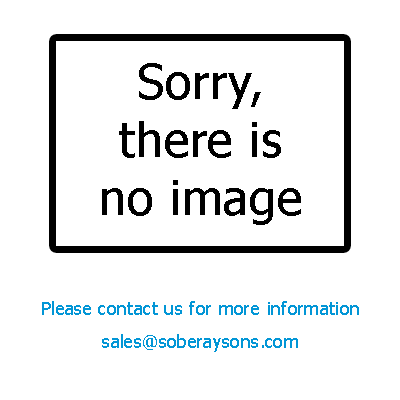
<style>
.page{position:relative;width:400px;height:400px;background:#ffffff}
.page>*{position:absolute;margin:0}
.t1{font:18px "Tahoma";letter-spacing:0.02em;color:#0296d6}
.t2{font:30px "Tahoma";letter-spacing:0.02em;color:#000000}
.t3{font:48px "Tahoma";letter-spacing:0.02em;color:#000000}
</style>
<div class="page">
<p class="t1" style="left:42px;top:63px;width:317px;height:289px;text-align:center"><span class="t2"> <br></span><span class="t3">Sorry,<br>there is<br>no image<br><br></span><br>Please contact us for more information<br> <br>sales@soberaysons.com</p>
</div>
